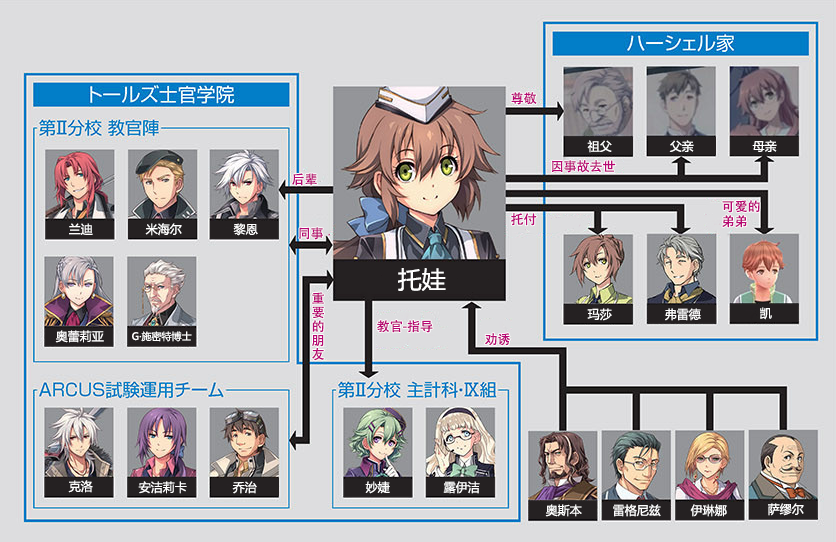
<style>
.page{position:relative;width:836px;height:542px;background:#dddddf}
.page>*{position:absolute;margin:0}
.t1{font:13px "AdobeHeitiStd-Regular";color:#b70773}
.t2{font:12px "MicrosoftYaHei";color:#ffffff}
.t3{font:13px/15px "AdobeHeitiStd-Regular";color:#b70773}
.t4{font:24px "MicrosoftYaHei";color:#ffffff}
.t5{font:13px/14px "AdobeHeitiStd-Regular";color:#b70773}
.t6{font:10px "MicrosoftYaHei";color:#ffffff}
</style>
<div class="page">
<p class="t1" style="left:511px;top:92px;width:26px;height:13px">尊敬</p>
<p class="t2" style="left:587px;top:140px;width:25px;height:13px">祖父</p>
<p class="t2" style="left:669px;top:140px;width:25px;height:12px">父亲</p>
<p class="t2" style="left:752px;top:140px;width:25px;height:12px">母亲</p>
<p class="t1" style="left:552px;top:160px;width:64px;height:13px">因事故去世</p>
<p class="t1" style="left:292px;top:173px;width:25px;height:13px">后辈</p>
<p class="t3" style="left:722px;top:200px;width:38px;height:28px">可爱的<br>弟弟</p>
<p class="t1" style="left:511px;top:213px;width:26px;height:13px">托付</p>
<p class="t2" style="left:69px;top:223px;width:24px;height:12px">兰迪</p>
<p class="t2" style="left:145px;top:223px;width:37px;height:13px">米海尔</p>
<p class="t2" style="left:233px;top:223px;width:25px;height:13px">黎恩</p>
<p class="t1" style="left:299px;top:227px;width:24px;height:13px">同事</p>
<p class="t4" style="left:398px;top:268px;width:48px;height:23px">托娃</p>
<p class="t5" style="left:312px;top:292px;width:12px;height:69px">重<br>要<br>的<br>朋<br>友</p>
<p class="t2" style="left:587px;top:308px;width:25px;height:13px">玛莎</p>
<p class="t2" style="left:665px;top:308px;width:36px;height:13px">弗雷德</p>
<p class="t2" style="left:760px;top:307px;width:12px;height:13px">凯</p>
<p class="t1" style="left:377px;top:320px;width:56px;height:13px">教官-指导</p>
<p class="t2" style="left:55px;top:330px;width:49px;height:13px">奥蕾莉亚</p>
<p class="t6" style="left:132px;top:331px;width:60px;height:11px">G·施密特博士</p>
<p class="t1" style="left:485px;top:333px;width:25px;height:13px">劝诱</p>
<p class="t2" style="left:68px;top:480px;width:25px;height:13px">克洛</p>
<p class="t2" style="left:138px;top:481px;width:49px;height:13px">安洁莉卡</p>
<p class="t2" style="left:232px;top:481px;width:25px;height:13px">乔治</p>
<p class="t2" style="left:365px;top:481px;width:25px;height:13px">妙婕</p>
<p class="t2" style="left:443px;top:481px;width:37px;height:13px">露伊洁</p>
<p class="t2" style="left:545px;top:504px;width:37px;height:13px">奥斯本</p>
<p class="t2" style="left:613px;top:504px;width:48px;height:13px">雷格尼兹</p>
<p class="t2" style="left:690px;top:504px;width:37px;height:13px">伊琳娜</p>
<p class="t2" style="left:768px;top:503px;width:36px;height:13px">萨缪尔</p>
</div>
